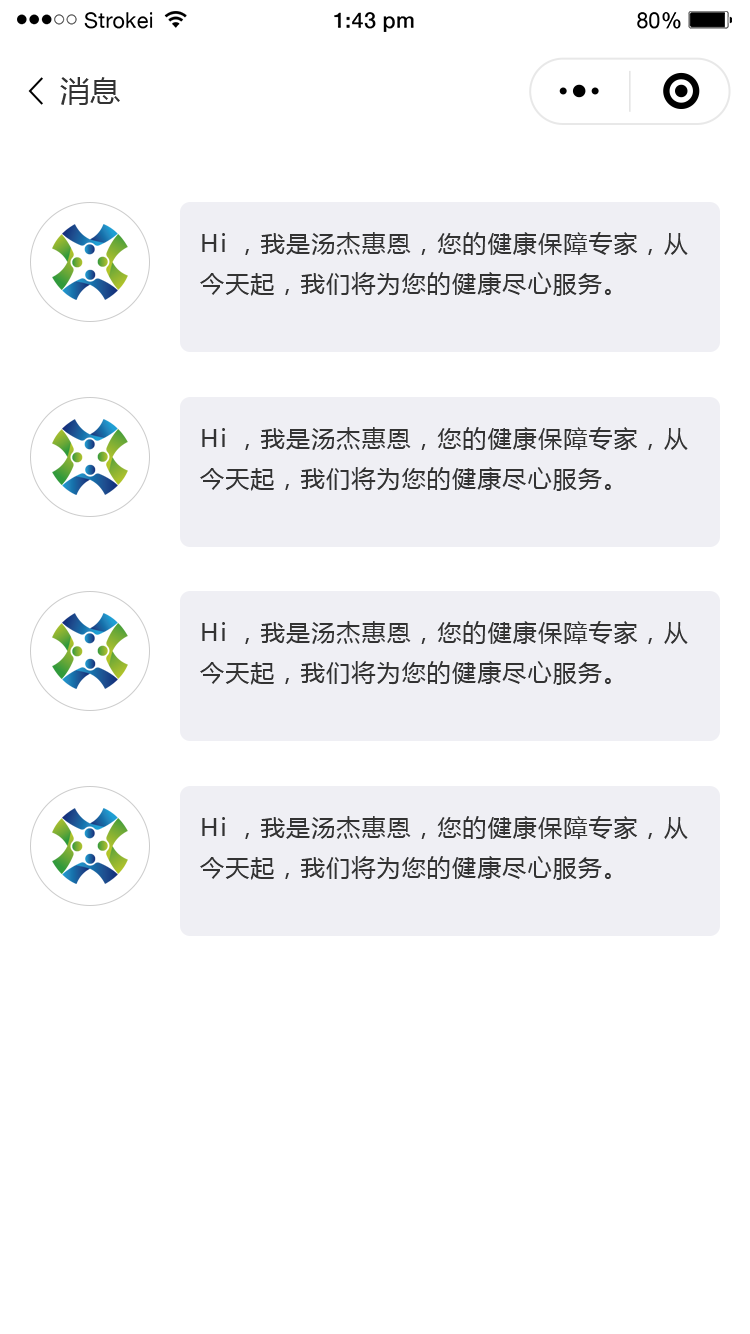
<style>
.page{position:relative;width:750px;height:1334px;background:#ffffff}
.page>*{position:absolute;margin:0}
.t1{font:30px "MicrosoftYaHei";color:#333333}
.t2{font:24px/40px "MicrosoftYaHei";letter-spacing:0.05em;color:#333333}
</style>
<div class="page">
<p class="t1" style="left:60px;top:77px;width:60px;height:28px">消息</p>
<p class="t2" style="left:200px;top:232px;width:488px;height:64px">Hi ，我是汤杰惠恩，您的健康保障专家，从今天起，我们将为您的健康尽心服务。</p>
<p class="t2" style="left:200px;top:427px;width:488px;height:64px">Hi ，我是汤杰惠恩，您的健康保障专家，从今天起，我们将为您的健康尽心服务。</p>
<p class="t2" style="left:200px;top:621px;width:488px;height:64px">Hi ，我是汤杰惠恩，您的健康保障专家，从今天起，我们将为您的健康尽心服务。</p>
<p class="t2" style="left:200px;top:816px;width:488px;height:64px">Hi ，我是汤杰惠恩，您的健康保障专家，从今天起，我们将为您的健康尽心服务。</p>
</div>
